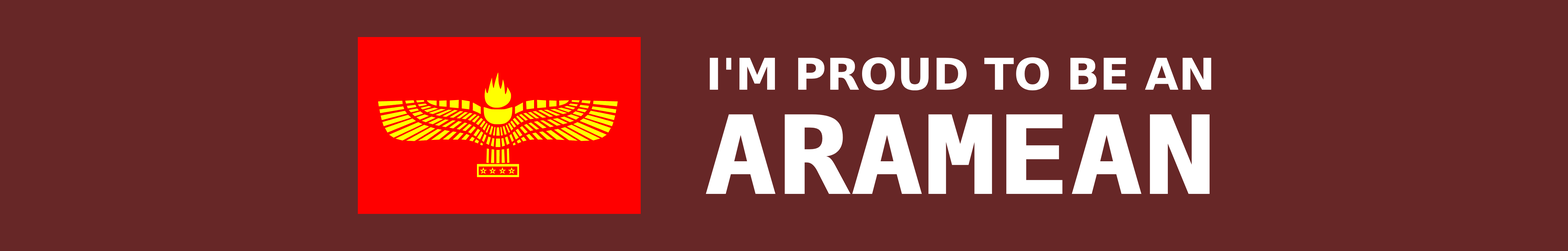
<style>
.page{position:relative;width:1568px;height:251px;background:#672727}
.page>*{position:absolute;margin:0}
.t1{font:43.7px "DejaVuSans-Bold";color:#ffffff}
.t2{font:109.1px "DejaVuSansMono-Bold";color:#ffffff;font-weight:bold;scale:1.07 1}
</style>
<div class="page">
<p class="t1" style="left:710px;top:57px;width:501px;height:33px">I'M PROUD TO BE AN</p>
<p class="t2" style="left:706px;top:114px;width:504px;height:80px">ARAMEAN</p>
</div>
